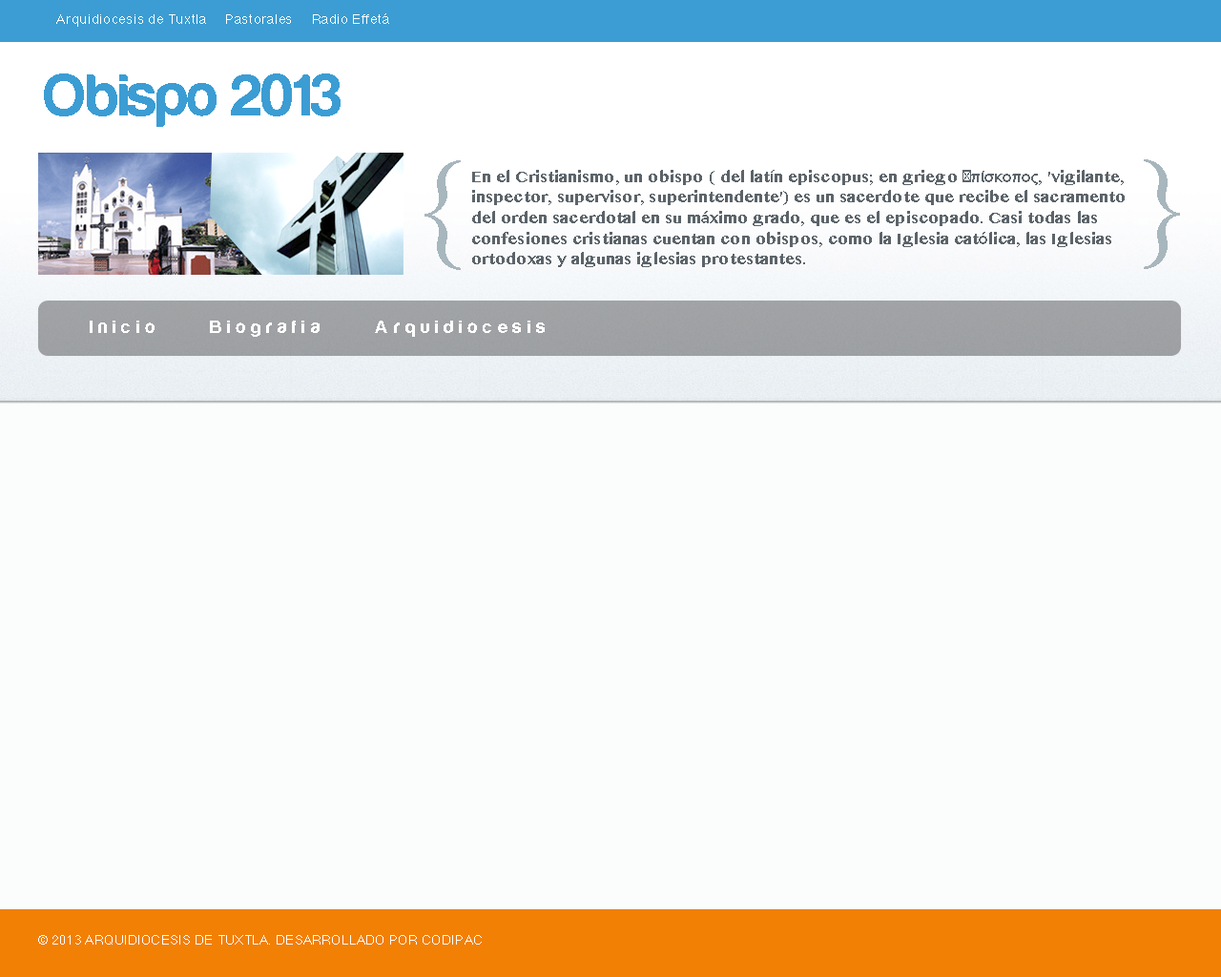
<style>
.page{position:relative;width:1221px;height:977px;background:#fbfcfc}
.page>*{position:absolute;margin:0}
.t1{font:13.4px "Helvetica-Bold";color:#ffffff}
.t2{font:61.4px "Harabara";color:#3b9dd3}
.t3{font:134.6px "KannadaMN";color:#a8b6bd}
.t4{font:17.2px "KannadaMN-Bold";color:#5b6369}
.t5{font:17.2px "MyriadPro-Regular";color:#5b6369}
.t6{font:19.1px "Harabara";letter-spacing:0.3em;color:#ffffff}
.t7{font:13.4px "Helvetica";color:#ffffff}
</style>
<div class="page">
<p class="t1" style="left:56px;top:13px;width:333px;height:14px">Arquidiocesis de Tuxtla     Pastorales     Radio Effetá</p>
<p class="t2" style="left:44px;top:73px;width:297px;height:54px">Obispo 2013</p>
<p class="t3" style="left:424px;top:160px;width:37px;height:110px">{</p>
<p class="t3" style="left:1144px;top:159px;width:36px;height:110px">}</p>
<p class="t4" style="left:472px;top:170px;width:653px;height:97px">En el Cristianismo, un obispo ( del lat<span class="t5">í</span>n episcopus; en griego <span class="t5">ἐπίσκοπος</span>, 'vigilante, inspector, supervisor, superintendente') es un sacerdote que recibe el sacramento del orden sacerdotal en su m<span class="t5">á</span>ximo grado, que es el episcopado. Casi todas las confesiones cristianas cuentan con obispos, como la Iglesia cat<span class="t5">ó</span>lica, las Iglesias ortodoxas y algunas iglesias protestantes.</p>
<p class="t6" style="left:90px;top:320px;width:455px;height:17px">Inicio     Biografia     Arquidiocesis</p>
<p class="t7" style="left:38px;top:935px;width:444px;height:9px">© 2013 ARQUIDIOCESIS DE TUXTLA. DESARROLLADO POR CODIPAC</p>
</div>
